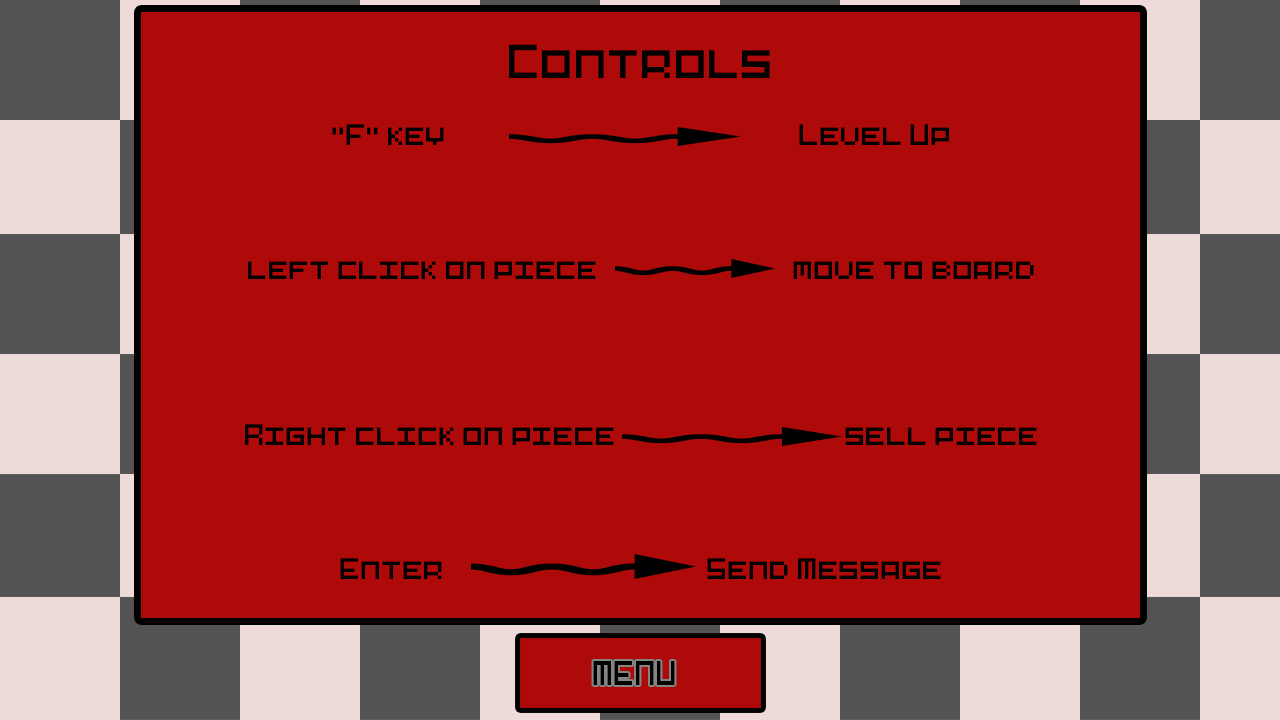
<style>
.page{position:relative;width:1280px;height:720px;background:#af0a0a}
.page>*{position:absolute;margin:0}
.t1{font:27.8px "Pixel-Art";color:#000000}
.t2{font:44.5px "Pixel-Art";color:#000000}
.t3{font:32px "Pixel-Art";color:#000000;scale:0.88 1}
</style>
<div class="page">
<p class="t1" style="left:245px;top:44px;width:792px;height:535px;text-align:center"><span class="t2">Controls<br></span><br>“F” key            Level Up<br><br><br><br>left click on piece                            move to board<br><br><br><br><br>Right click on piece                 sell piece<br><br><br><br>Enter        Send Message</p>
<p class="t3" style="left:593px;top:661px;width:82px;height:24px">MENU</p>
</div>
